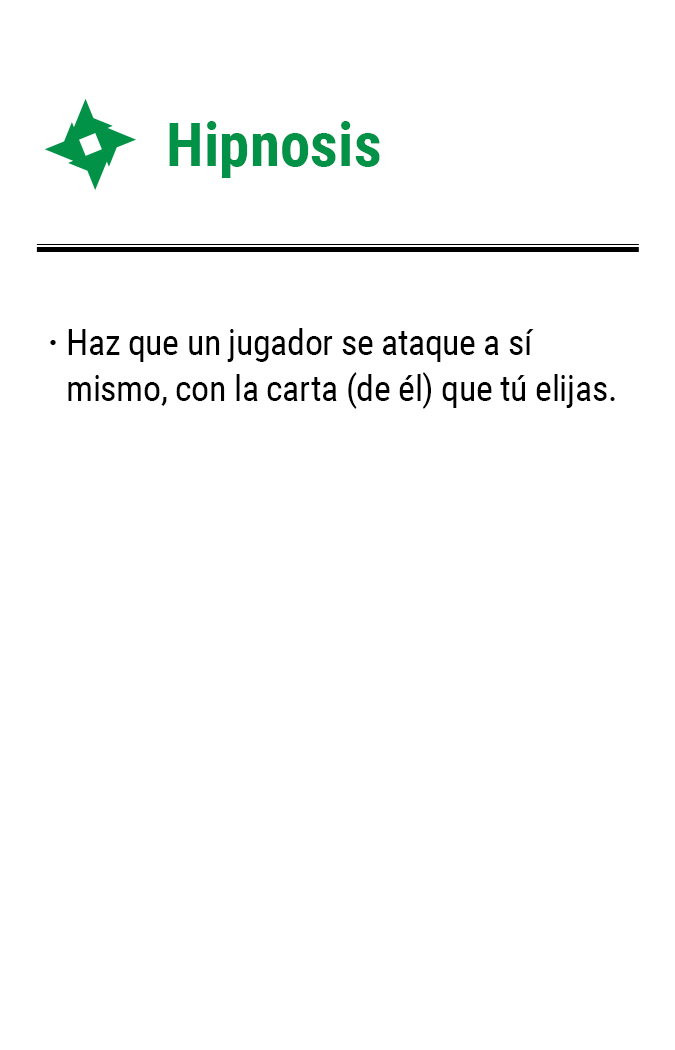
<style>
.page{position:relative;width:675px;height:1050px;background:#ffffff}
.page>*{position:absolute;margin:0}
.t1{font:61.2px "RobotoCondensed-Bold";color:#019147}
.t2{font:35.8px/45.8px "RobotoCondensed-Regular";letter-spacing:-0.01em;color:#000000}
.t3{font:35.8px "RobotoCondensed-Bold";letter-spacing:-0.01em;color:#000000}
</style>
<div class="page">
<p class="t1" style="left:169px;top:121px;width:211px;height:57px">Hipnosis</p>
<p class="t2" style="left:68px;top:328px;width:547px;height:81px">Haz que un jugador se ataque a sí mismo, con la carta (de él) que tú elijas.</p>
<p class="t3" style="left:50px;top:340px;width:6px;height:5px">·</p>
</div>
